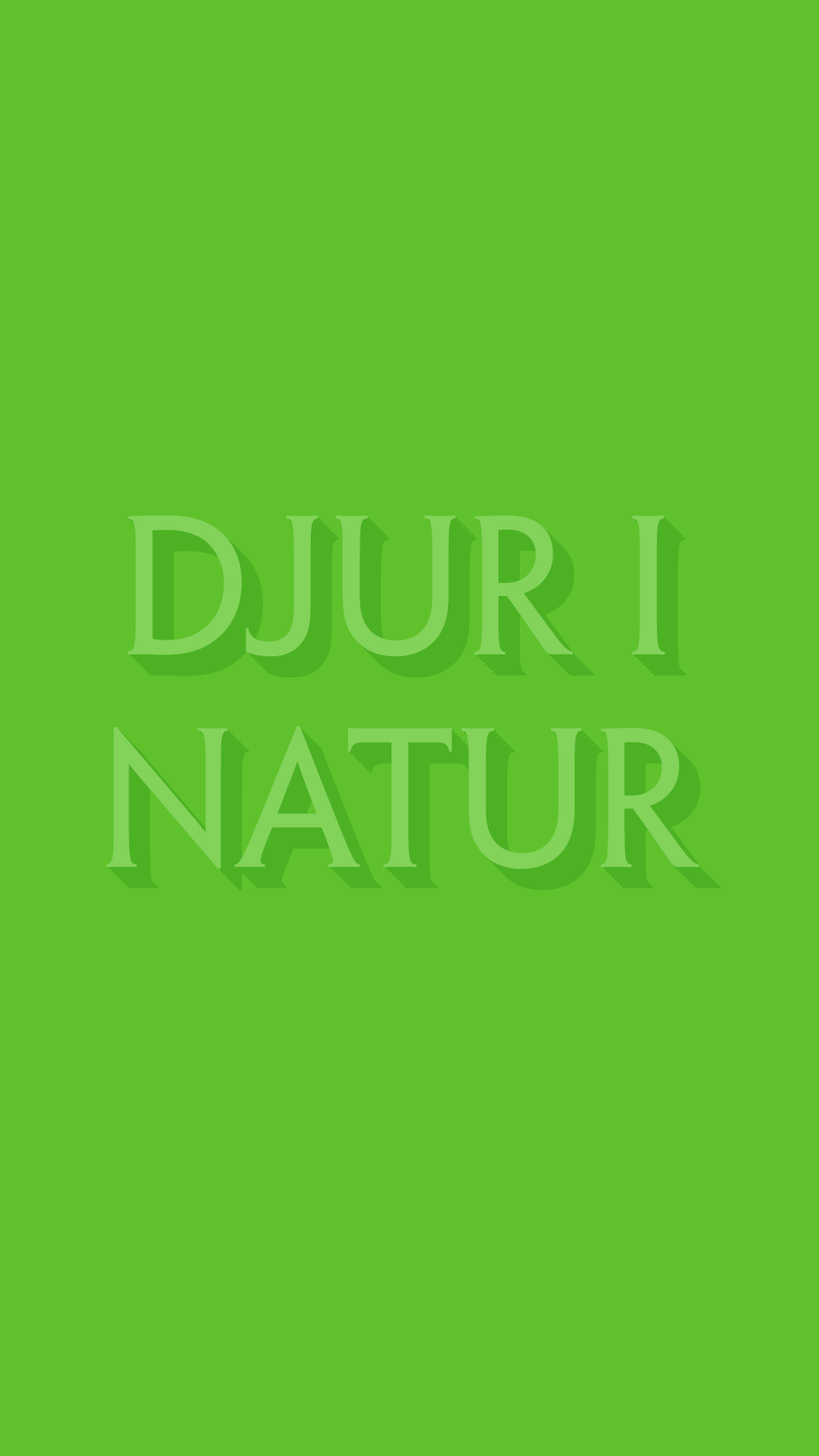
<style>
.page{position:relative;width:819px;height:1456px;background:#5fc22c}
.page>*{position:absolute;margin:0}
.t1{font:177.1px "PenumbraHalfSerifStd-Reg";color:#83d25a}
</style>
<div class="page">
<p class="t1" style="left:106px;top:515px;width:594px;height:354px;text-align:center">Djur i <br>Natur</p>
</div>
